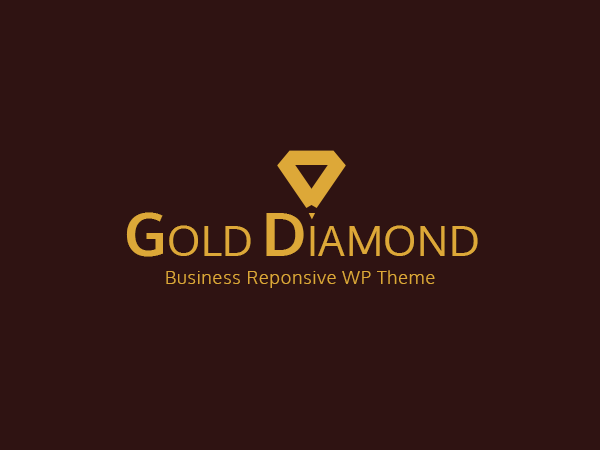
<style>
.page{position:relative;width:600px;height:450px;background:#2f1312}
.page>*{position:absolute;margin:0}
.t1{font:60px "Oxygen-Regular";letter-spacing:0.01em;color:#dda838;font-variant:small-caps}
.t2{font:60px "Oxygen-Bold";letter-spacing:0.01em;color:#dda838}
.t3{font:60px "Oxygen-Bold";letter-spacing:0.01em;color:#dda838;font-variant:small-caps}
.t4{font:18px "Oxygen-Light";letter-spacing:0.05em;color:#dda838}
</style>
<div class="page">
<p class="t1" style="left:126px;top:212px;width:352px;height:45px"><span class="t2">G</span>old<span class="t3">D</span>iamond</p>
<p class="t4" style="left:166px;top:270px;width:269px;height:18px">Business Reponsive WP Theme</p>
</div>
